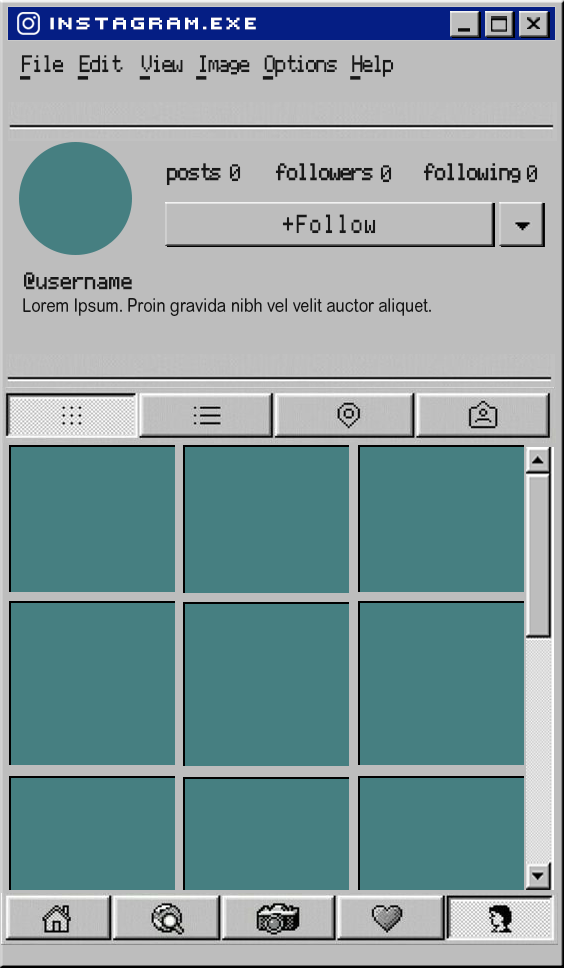
<style>
.page{position:relative;width:564px;height:968px;background:#467f81}
.page>*{position:absolute;margin:0}
.t1{font:23.7px "Victor'sPixelFont";color:#ffffff;font-weight:bold;scale:1.1 1}
.t2{font:19.3px "Apple";letter-spacing:-0.36em;color:#171717;scale:0.84 1}
.t3{font:19.3px "Apple";letter-spacing:-0.36em;color:#171717;text-decoration:underline;scale:0.84 1}
.t4{font:19.3px "Apple";letter-spacing:-0.36em;color:#171717;font-weight:bold;scale:0.84 1}
.t5{font:20.9px "Apple";letter-spacing:-0.15em;color:#171717;scale:0.77 1}
.t6{font:19.3px "Apple";letter-spacing:-0.27em;color:#171717;font-weight:bold;scale:0.83 1}
.t7{font:19.3px "ArialRoundedMTStd";color:#171717;scale:0.83 1}
</style>
<div class="page">
<p class="t1" style="left:50px;top:17px;width:206px;height:13px">Instagram.exe</p>
<p class="t2" style="left:20px;top:55px;width:374px;height:25px"><span class="t3">F</span>ile     <span class="t3">E</span>dit     <span class="t3">V</span>iew    <span class="t3">I</span>mage    <span class="t3">O</span>ptions    <span class="t3">H</span>elp</p>
<p class="t4" style="left:166px;top:163px;width:55px;height:23px">posts</p>
<p class="t2" style="left:229px;top:164px;width:12px;height:18px">0</p>
<p class="t4" style="left:275px;top:163px;width:98px;height:18px">followers</p>
<p class="t2" style="left:380px;top:165px;width:12px;height:18px">0</p>
<p class="t4" style="left:423px;top:163px;width:98px;height:20px">following</p>
<p class="t2" style="left:526px;top:165px;width:12px;height:18px">0</p>
<p class="t5" style="left:282px;top:214px;width:94px;height:20px">+Follow</p>
<p class="t6" style="left:24px;top:272px;width:108px;height:18px">@username</p>
<p class="t7" style="left:23px;top:298px;width:408px;height:18px">Lorem Ipsum. Proin gravida nibh vel velit auctor aliquet.</p>
</div>
